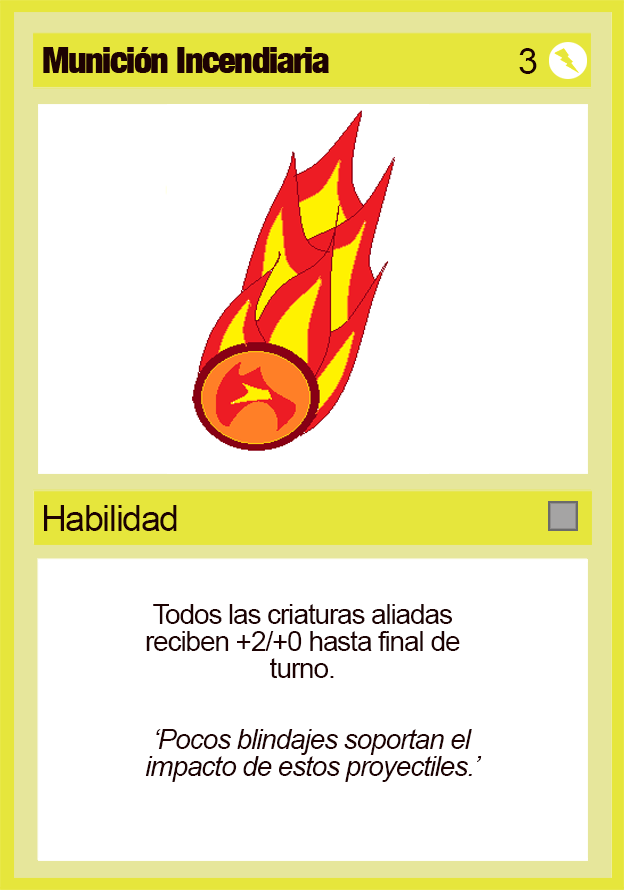
<style>
.page{position:relative;width:624px;height:890px;background:#ffffff}
.page>*{position:absolute;margin:0}
.t1{font:36px "ArialMT";letter-spacing:-0.04em;color:#1d0202}
.t2{font:28px/27px "ArialMT";letter-spacing:-0.04em;color:#1d0202}
.t3{font:28px/27px "Arial-ItalicMT";letter-spacing:-0.04em;color:#1d0202}
</style>
<div class="page">
<p class="t1" style="left:519px;top:48px;width:18px;height:26px">3</p>
<p class="t1" style="left:44px;top:505px;width:133px;height:26px">Habilidad</p>
<p class="t2" style="left:146px;top:604px;width:314px;height:74px;text-align:center">Todos las criaturas aliadas reciben +2/+0 hasta final de turno.</p>
<p class="t3" style="left:145px;top:729px;width:337px;height:53px;text-align:center">‘Pocos blindajes soportan el impacto de estos proyectiles.’</p>
</div>
